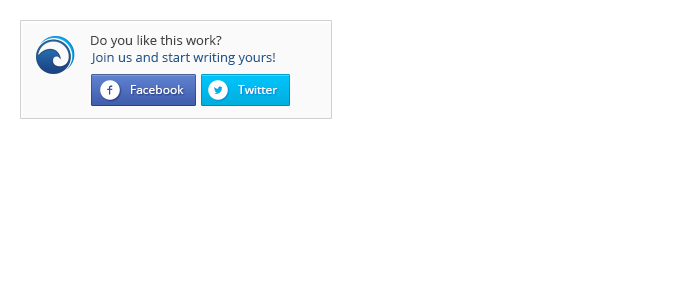
<style>
.page{position:relative;width:674px;height:304px;background:#ffffff}
.page>*{position:absolute;margin:0}
.t1{font:13px "OpenSans";color:#454545}
.t2{font:13px "OpenSans";color:#245a8e}
.t3{font:12px "OpenSans";color:#ffffff}
</style>
<div class="page">
<p class="t1" style="left:91px;top:35px;width:131px;height:13px">Do you like this work?</p>
<p class="t2" style="left:90px;top:52px;width:185px;height:13px">Join us and start writing yours!</p>
<p class="t3" style="left:131px;top:85px;width:53px;height:9px">Facebook</p>
<p class="t3" style="left:238px;top:85px;width:40px;height:9px">Twitter</p>
</div>
